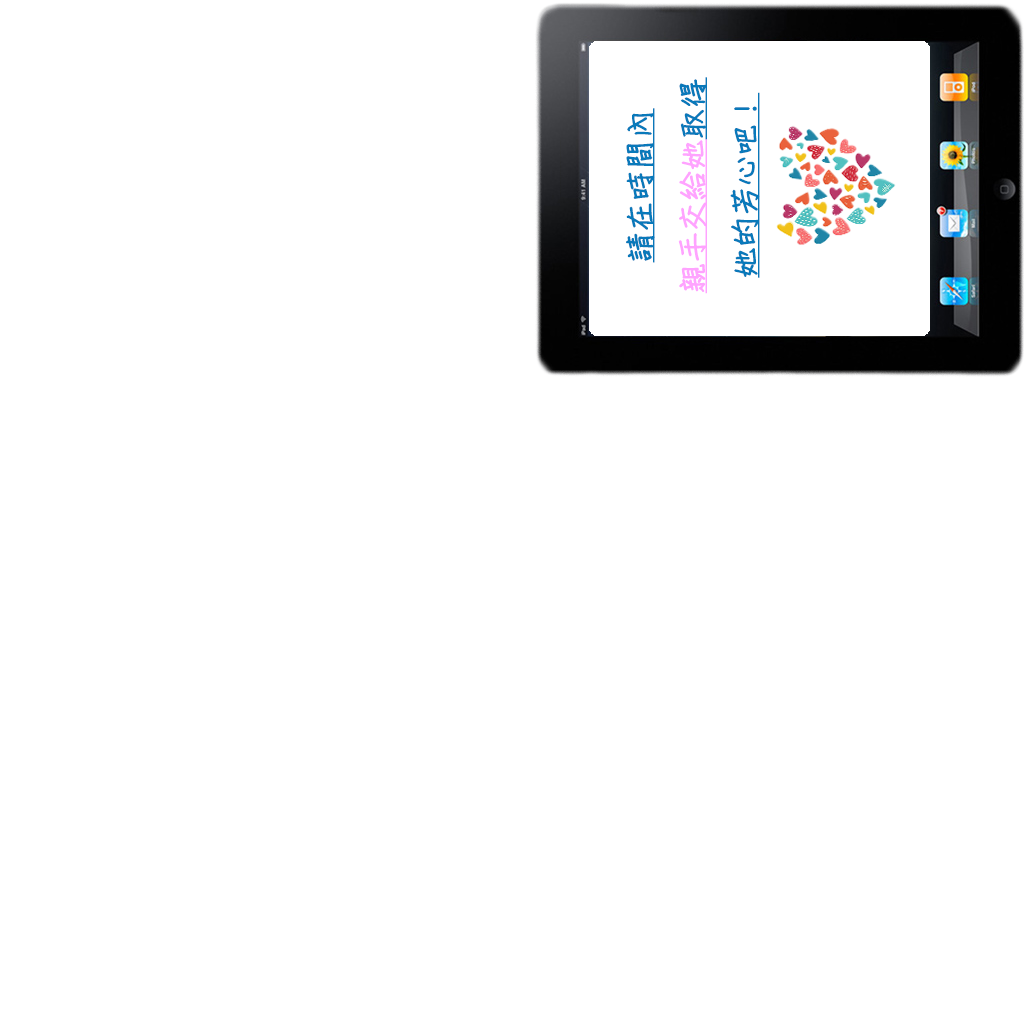
<style>
.page{position:relative;width:1024px;height:1024px;background:#ffffff}
.page>*{position:absolute;margin:0}
.t1{font:30px "DFChu-W4-WINP-BF";color:#0979ba;font-weight:bold;text-decoration:underline}
.t2{font:30px "DFChu-W4-WINP-BF";color:#ffa3ff;font-weight:bold;text-decoration:underline}
</style>
<div class="page">
<p class="t1" style="left:626px;top:77px;width:134px;height:217px;text-align:center;rotate:-90deg">請在時間內<br><span class="t2">親手交給她</span>取得<br>她的芳心吧！</p>
</div>
